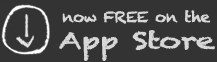
<style>
.page{position:relative;width:217px;height:62px;background:#333333}
.page>*{position:absolute;margin:0}
.t1{font:14.4px "Chalkduster";letter-spacing:-0.05em;color:#d7d7d7;font-weight:bold;scale:1.06 1}
.t2{font:22.5px "Chalkduster";letter-spacing:-0.05em;color:#d7d7d7;font-weight:bold;scale:1.38 1}
</style>
<div class="page">
<p class="t1" style="left:62px;top:10px;width:149px;height:14px">now FREE on the</p>
<p class="t2" style="left:59px;top:30px;width:157px;height:31px">App Store</p>
</div>
